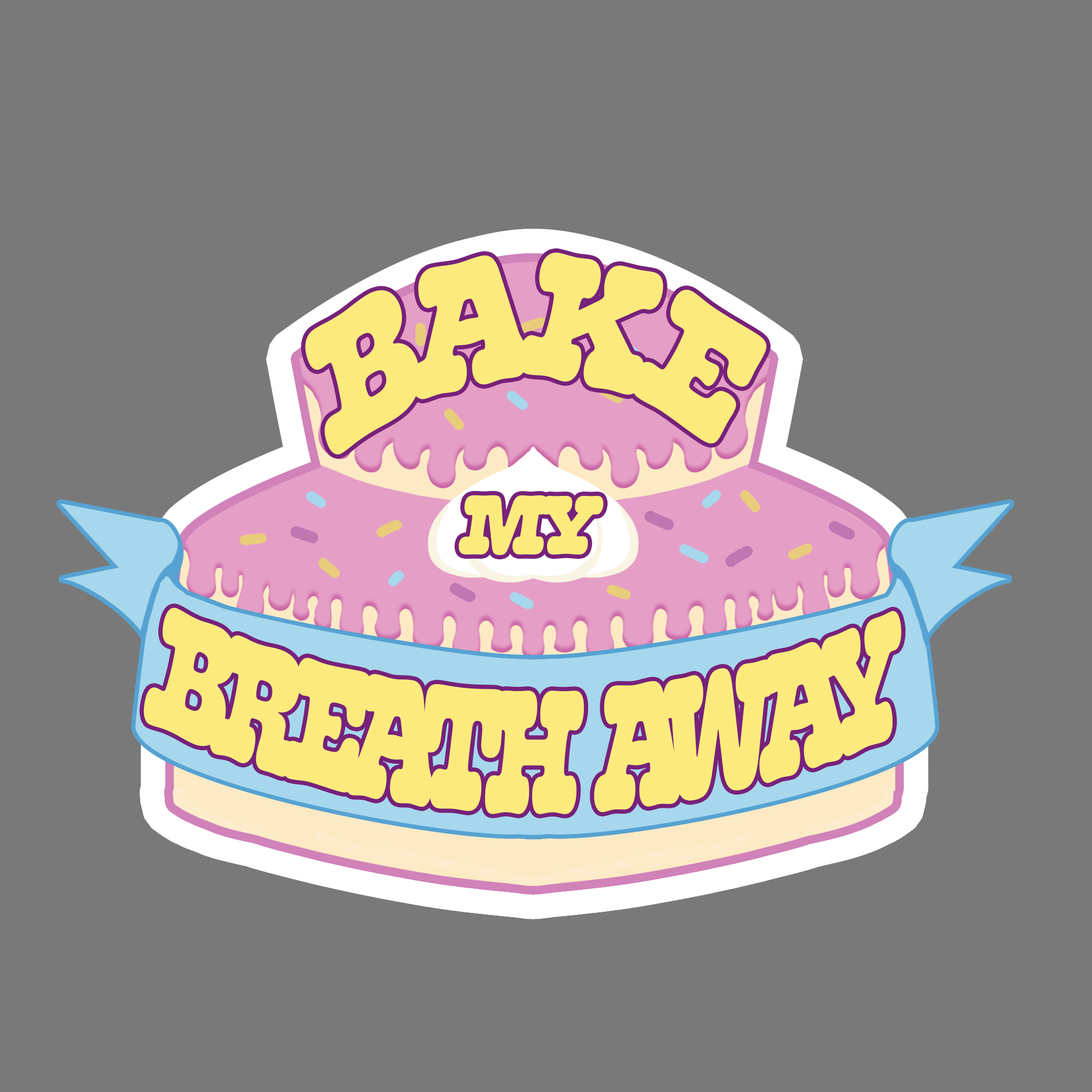
<style>
.page{position:relative;width:1092px;height:1092px;background:#797979}
.page>*{position:absolute;margin:0}
.t1{font:184.1px "Olivita-Italic";letter-spacing:-0.12em;color:#fceb7c;scale:0.75 1}
.t2{font:85.5px "Olivita-Italic";letter-spacing:-0.12em;color:#fceb7c;scale:0.9 1}
.t3{font:180px "Olivita-Italic";letter-spacing:-0.12em;color:#fceb7c;scale:0.57 1}
</style>
<div class="page">
<p class="t1" style="left:305px;top:252px;width:462px;height:203px">BAKE</p>
<p class="t2" style="left:459px;top:495px;width:145px;height:60px">MY</p>
<p class="t3" style="left:143px;top:608px;width:759px;height:206px">BREATH   AWAY</p>
</div>
